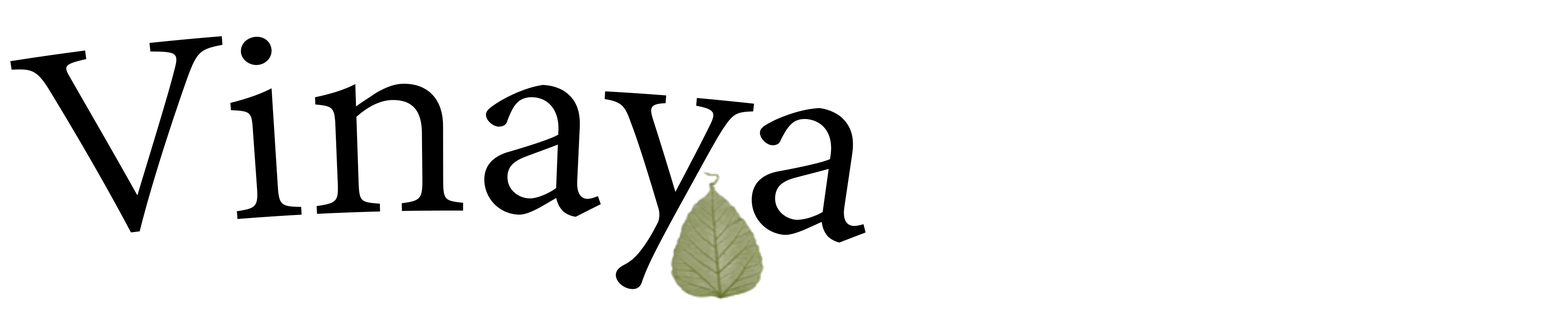
<style>
.page{position:relative;width:1568px;height:314px;background:#ffffff}
.page>*{position:absolute;margin:0}
.t1{font:304.9px "AdobeDevanagari-Regular";color:#000000}
</style>
<div class="page">
<p class="t1" style="left:10px;top:36px;width:856px;height:253px">Vinaya</p>
</div>
